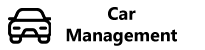
<style>
.page{position:relative;width:205px;height:50px;background:#ffffff}
.page>*{position:absolute;margin:0}
.t1{font:18px "MicrosoftTaiLe-Bold";color:#000000}
</style>
<div class="page">
<p class="t1" style="left:66px;top:7px;width:111px;height:39px;text-align:center">Car <br>Management</p>
</div>
